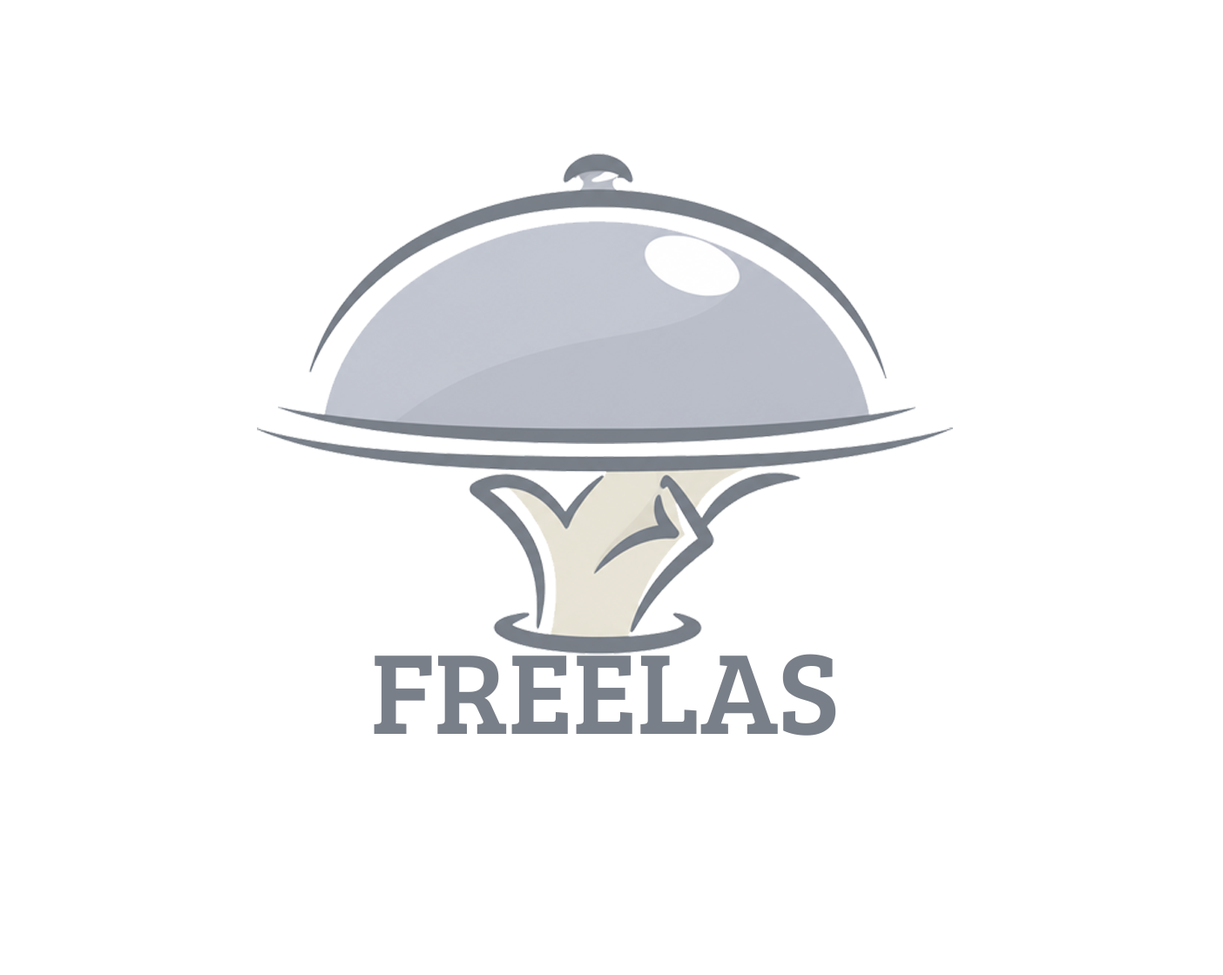
<style>
.page{position:relative;width:1223px;height:975px;background:#ffffff}
.page>*{position:absolute;margin:0}
.t1{font:117.8px "BreeSerif-Regular";color:#797f88}
</style>
<div class="page">
<p class="t1" style="left:374px;top:654px;width:462px;height:82px">FREELAS</p>
</div>
